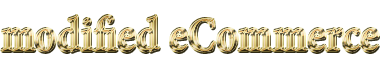
<style>
.page{position:relative;width:380px;height:60px;background:#ffffff}
.page>*{position:absolute;margin:0}
.t1{font:48px "MinionPro-Bold";letter-spacing:0.025em;scale:0.83 1}
</style>
<div class="page">
<p class="t1" style="left:2px;top:16px;width:376px;height:36px">modified eCommerce</p>
<p class="t1" style="left:2px;top:16px;width:376px;height:36px">modified eCommerce</p>
</div>
